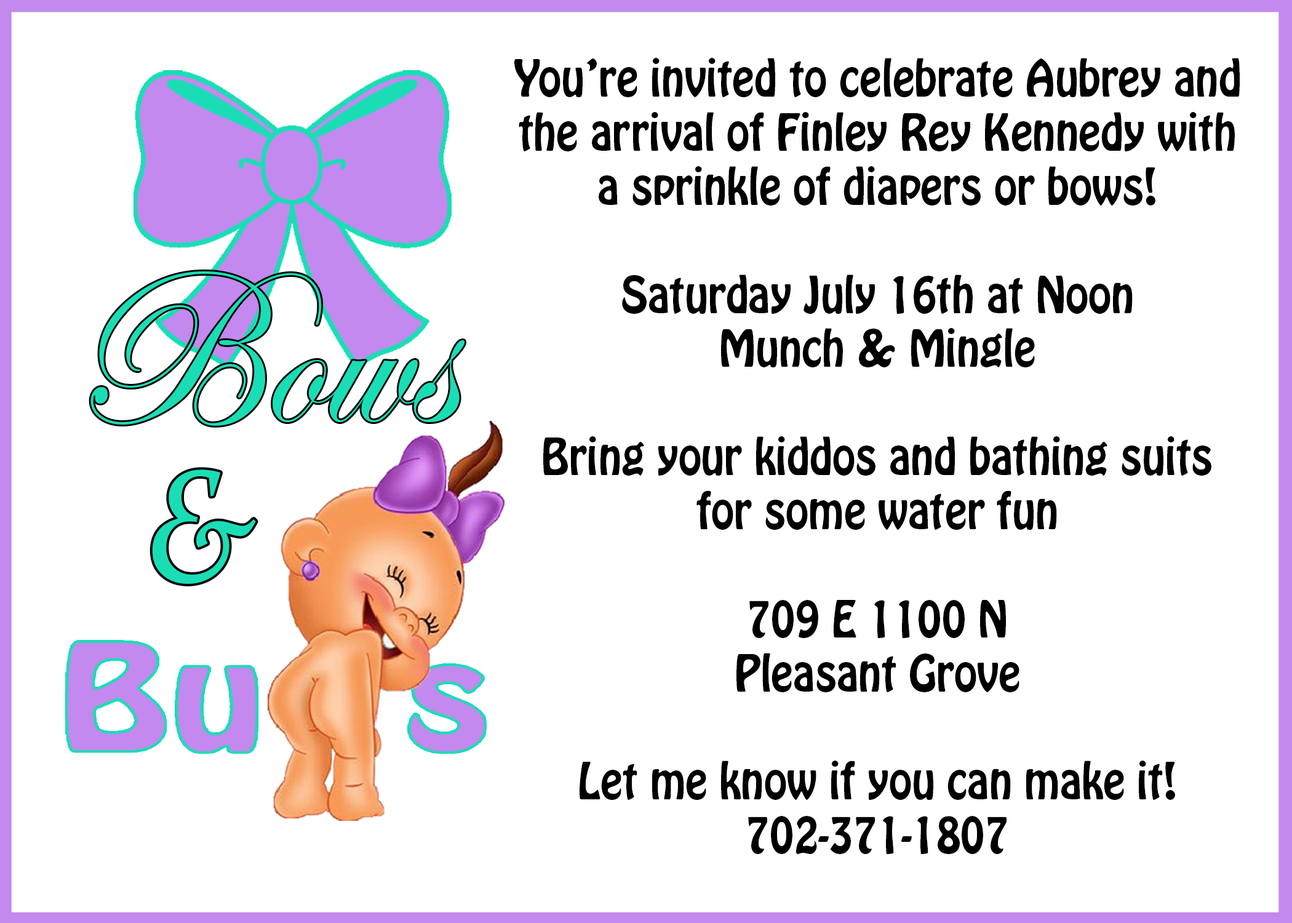
<style>
.page{position:relative;width:1292px;height:923px;background:#ffffff}
.page>*{position:absolute;margin:0}
.t1{font:45px "HoboStd";color:#000000;scale:0.93 1}
.t2{font:225.2px "EdwardianScriptITC";color:#1addb6;scale:0.93 1}
.t3{font:165px "Constantia-Italic";color:#1addb6;scale:0.85 1}
</style>
<div class="page">
<p class="t1" style="left:514px;top:58px;width:726px;height:796px;text-align:center">You’re invited to celebrate Aubrey and the arrival of Finley Rey Kennedy with a sprinkle of diapers or bows!<br><br>Saturday July 16th at Noon<br>Munch &amp; Mingle<br><br>Bring your kiddos and bathing suits  for some water fun<br><br>709 E 1100 N<br>Pleasant Grove<br><br>Let me know if you can make it!<br>702-371-1807</p>
<p class="t2" style="left:90px;top:271px;width:375px;height:155px">Bows</p>
<p class="t3" style="left:152px;top:469px;width:104px;height:115px">&amp;</p>
</div>
